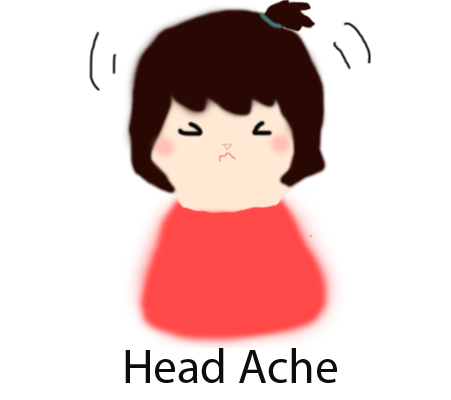
<style>
.page{position:relative;width:451px;height:400px;background:#ffffff}
.page>*{position:absolute;margin:0}
.t1{font:48px "MyriadPro-Regular";color:#0d0d0c}
</style>
<div class="page">
<p class="t1" style="left:125px;top:348px;width:212px;height:35px">Head Ache</p>
</div>
